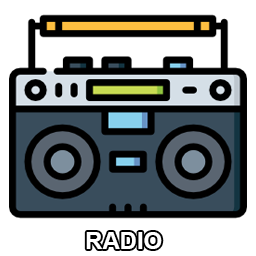
<style>
.page{position:relative;width:256px;height:256px;background:#ffffff}
.page>*{position:absolute;margin:0}
.t1{font:24px "Arial-BoldMT";color:#ffffff}
</style>
<div class="page">
<p class="t1" style="left:86px;top:232px;width:76px;height:17px">RADIO</p>
</div>
